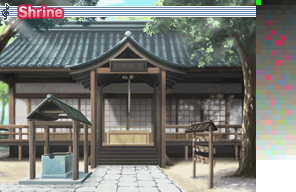
<style>
.page{position:relative;width:296px;height:192px}
.page>*{position:absolute;margin:0}
.t1{font:12px "HummingStd-E";letter-spacing:0.02em}
</style>
<div class="page">
<p class="t1" style="left:19px;top:6px;width:44px;height:12px">Shrine</p>
</div>
